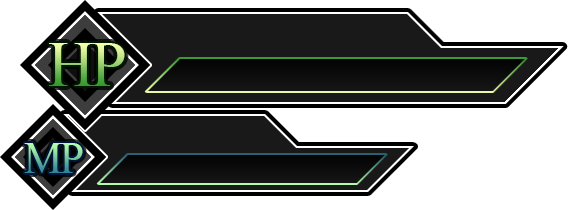
<style>
.page{position:relative;width:568px;height:210px;background:#ffffff}
.page>*{position:absolute;margin:0}
.t1{font:65px "TimesNewRomanPSMT";letter-spacing:-0.05em}
.t2{font:43.9px "TimesNewRomanPSMT";letter-spacing:-0.05em}
</style>
<div class="page">
<p class="t1" style="left:49px;top:43px;width:76px;height:43px">HP</p>
<p class="t2" style="left:24px;top:143px;width:59px;height:30px">MP</p>
</div>
